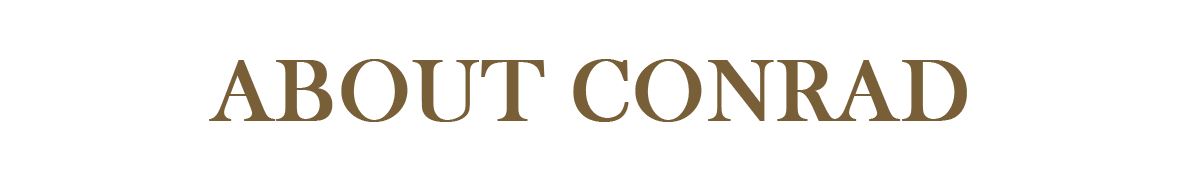
<style>
.page{position:relative;width:1200px;height:180px;background:#ffffff}
.page>*{position:absolute;margin:0}
.t1{font:90px "BaskOldFace";color:#785f37;font-weight:bold}
</style>
<div class="page">
<p class="t1" style="left:209px;top:59px;width:758px;height:63px">ABOUT CONRAD</p>
</div>
